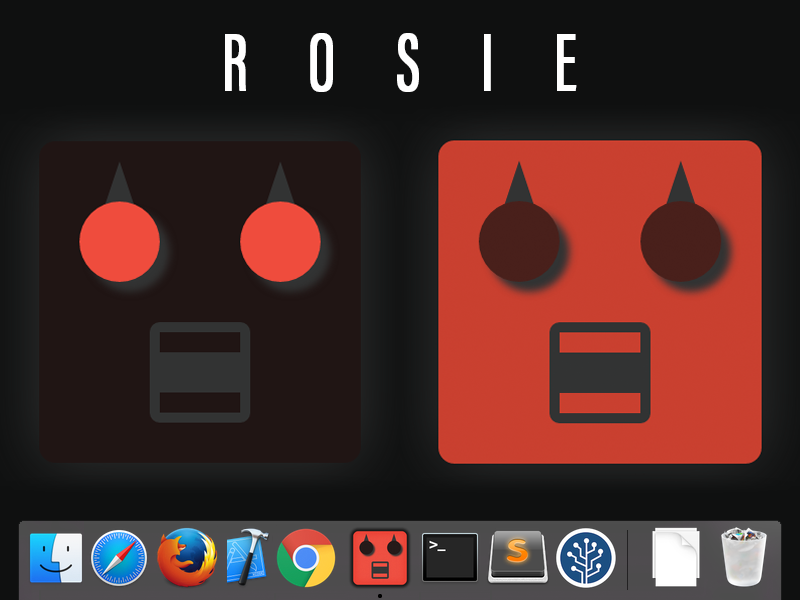
<style>
.page{position:relative;width:800px;height:600px;background:#0f1010}
.page>*{position:absolute;margin:0}
.t1{font:85px "AcuminProExtraCond-Regular";letter-spacing:0.8em;color:#ffffff;font-weight:bold;scale:0.87 1}
</style>
<div class="page">
<p class="t1" style="left:225px;top:33px;width:352px;height:59px">ROSIE</p>
</div>
